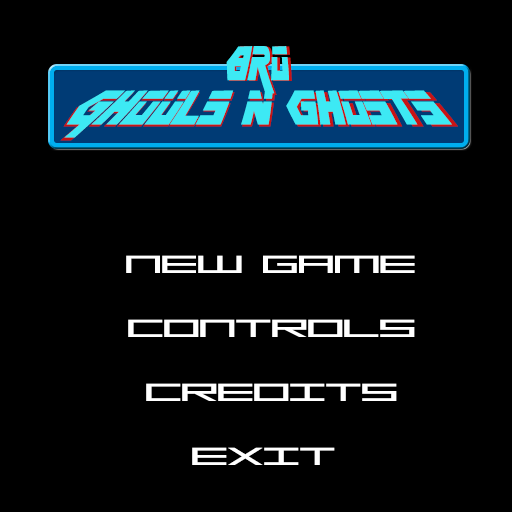
<style>
.page{position:relative;width:512px;height:512px;background:#000000}
.page>*{position:absolute;margin:0}
.t1{font:38px "MetalGear";color:#3de9f4;scale:1.2 1}
.t2{font:36.9px "MetalGear";color:#3de9f4;scale:1.22 1}
.t3{font:24px "MGS2Menu";color:#ffffff}
</style>
<div class="page">
<p class="t1" style="left:60px;top:46px;width:398px;height:95px;text-align:center">BRO<br>GHOULS n ghosts</p>
<p class="t2" style="left:64px;top:46px;width:388px;height:92px;text-align:center">BRO<br>GHOULS n ghosts</p>
<p class="t3" style="left:126px;top:255px;width:289px;height:18px">NEW GAME</p>
<p class="t3" style="left:128px;top:319px;width:287px;height:18px">CONTROLS</p>
<p class="t3" style="left:146px;top:383px;width:251px;height:18px">CREDITS</p>
<p class="t3" style="left:192px;top:447px;width:143px;height:18px">EXIT</p>
</div>
